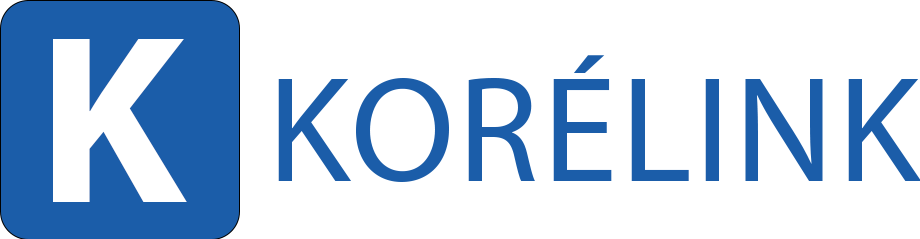
<style>
.page{position:relative;width:920px;height:239px;background:#ffffff}
.page>*{position:absolute;margin:0}
.t1{font:242.3px "MyriadPro-Bold";color:#ffffff;text-transform:uppercase}
.t2{font:151.8px "MyriadPro-Regular";color:#1b5da9;text-transform:uppercase}
</style>
<div class="page">
<p class="t1" style="left:53px;top:39px;width:134px;height:163px">K</p>
<p class="t2" style="left:278px;top:55px;width:643px;height:127px">Korélink</p>
</div>
